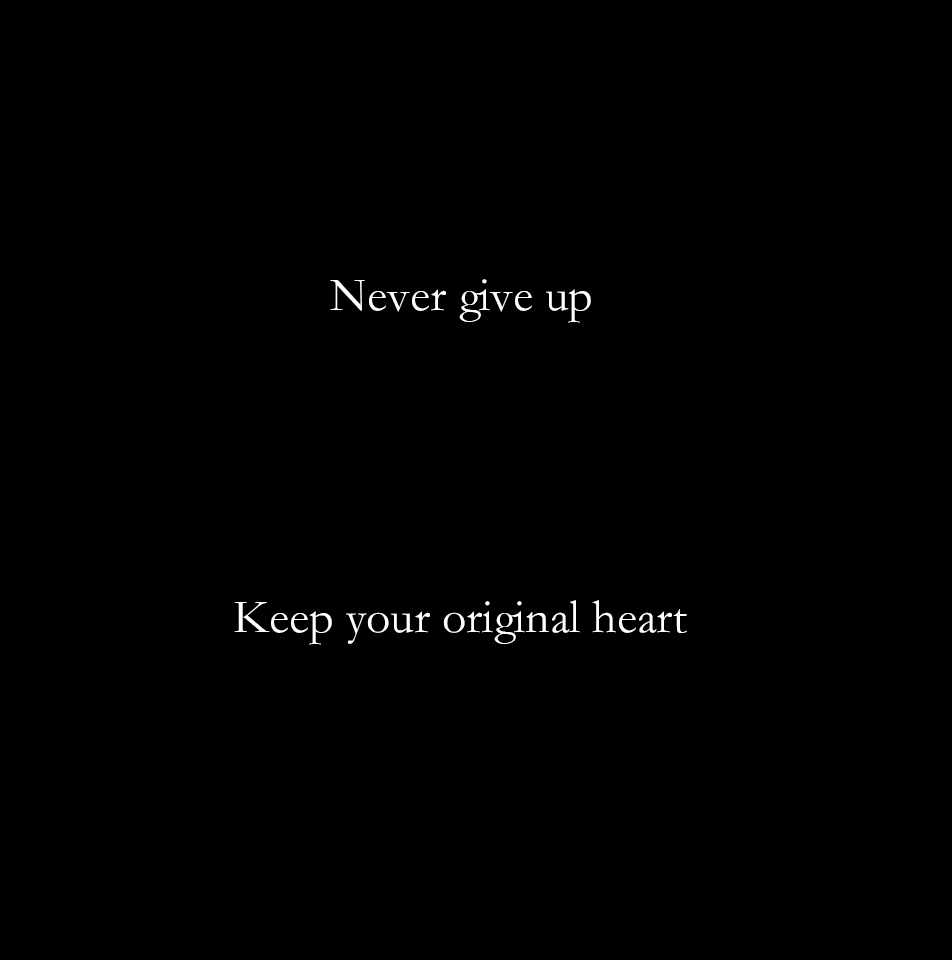
<style>
.page{position:relative;width:952px;height:960px;background:#000000}
.page>*{position:absolute;margin:0}
.t1{font:48px "STSong";color:#ffffff}
</style>
<div class="page">
<p class="t1" style="left:330px;top:279px;width:261px;height:44px">Never give up</p>
<p class="t1" style="left:234px;top:600px;width:453px;height:45px">Keep your original heart</p>
</div>
